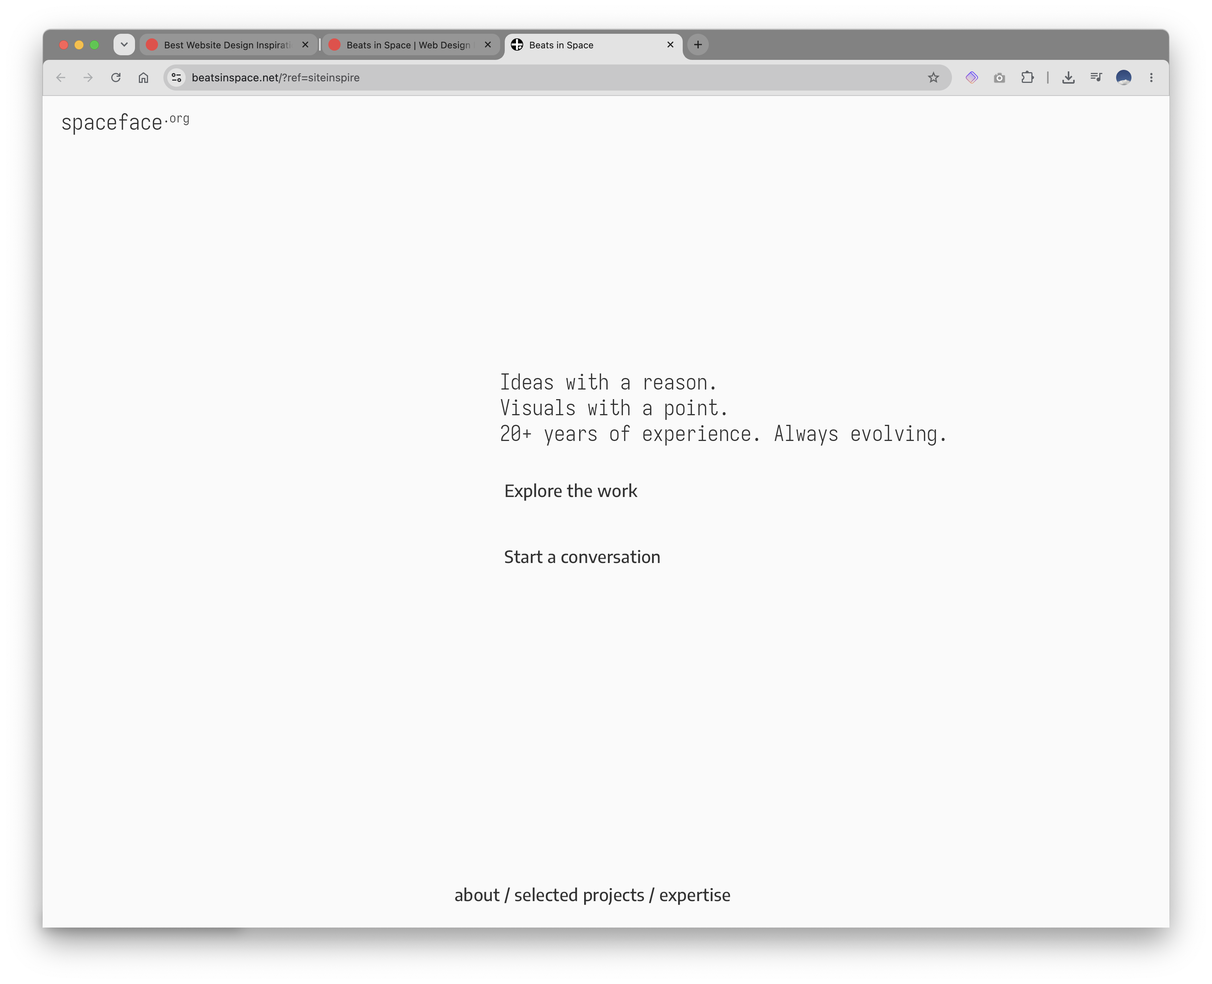
<style>
.page{position:relative;width:1212px;height:984px;background:#fafafa}
.page>*{position:absolute;margin:0}
.t1{font:22.3px "Iosevka-Light";letter-spacing:0.01em;color:#333333}
.t2{font:21.5px "Iosevka-Light";letter-spacing:0.01em;color:#333333}
.t3{font:16.9px "EncodeSans-Medium";letter-spacing:0.01em;color:#333333}
</style>
<div class="page">
<p class="t1" style="left:62px;top:113px;width:127px;height:22px">spaceface.org</p>
<p class="t2" style="left:501px;top:373px;width:444px;height:72px">Ideas with a reason.<br>Visuals with a point.<br>20+ years of experience. Always evolving.</p>
<p class="t3" style="left:506px;top:483px;width:132px;height:18px">Explore the work</p>
<p class="t3" style="left:505px;top:550px;width:155px;height:13px">Start a conversation</p>
<p class="t3" style="left:455px;top:887px;width:275px;height:18px">about / selected projects / expertise</p>
</div>
